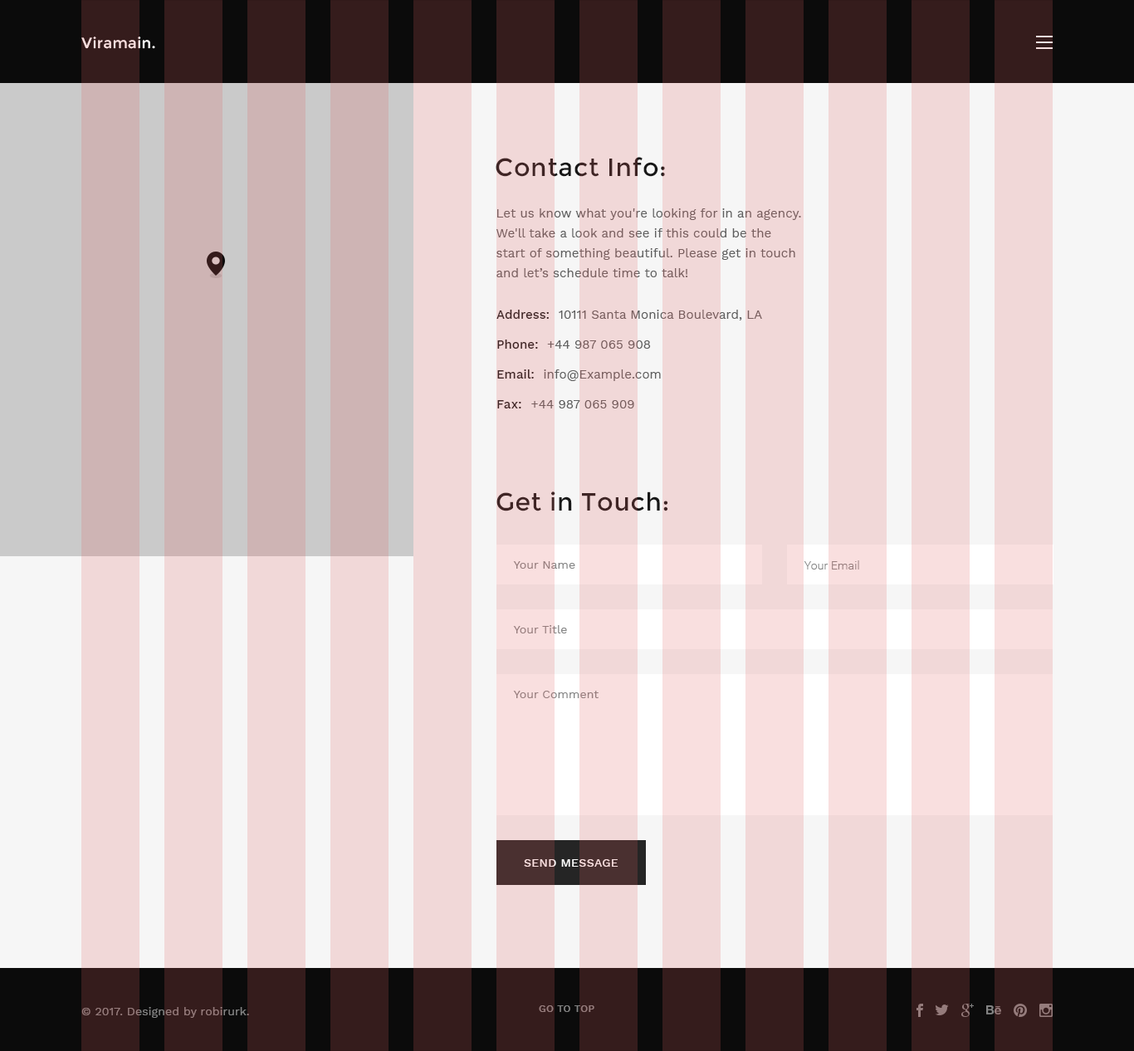
<style>
.page{position:relative;width:1134px;height:1051px;background:#f1d8d8}
.page>*{position:absolute;margin:0}
.t1{font:14.9px "Montserrat-Regular";letter-spacing:0.025em;color:#f9dfdf}
.t2{font:24.9px "Montserrat-Regular";letter-spacing:0.025em;color:#3f2525}
.t3{font:12.5px/19.9px "WorkSans-Regular";letter-spacing:0.005em;color:#795f5f}
.t4{font:12.5px/29.9px "WorkSans-Regular";letter-spacing:0.005em}
.t5{font:12.5px/29.9px "WorkSans-Medium";letter-spacing:0.005em}
.t6{font:12.5px/29.9px "WorkSans-Medium";letter-spacing:0.025em}
.t7{font:11.6px "WorkSans-Regular";letter-spacing:0.005em;color:#858585}
.t8{font:11.6px "Roboto-Light";letter-spacing:0.01em;color:#858585}
.t9{font:11.6px "WorkSans-Medium";letter-spacing:0.025em;color:#f9dfdf;text-transform:uppercase}
.t10{font:11.6px "WorkSans-Regular";letter-spacing:0.005em;color:#838383}
.t11{font:10px "WorkSans-Medium";letter-spacing:0.025em;color:#838383;text-transform:uppercase}
</style>
<div class="page">
<p class="t1" style="left:81px;top:37px;width:74px;height:12px">Viramain.</p>
<p class="t2" style="left:496px;top:157px;width:169px;height:20px">Contact Info:</p>
<p class="t3" style="left:496px;top:208px;width:305px;height:69px">Let us know what you're looking for in an agency. <br>We'll take a look and see if this could be the <br>start of something beautiful. Please get in touch <br>and let’s schedule time to talk!</p>
<p class="t4" style="left:497px;top:310px;width:265px;height:99px"><span class="t5">Address:  </span>10111 Santa Monica Boulevard, LA<br><span class="t5">Phone:  </span>+44 987 065 908<br><span class="t5">Email:  </span>info@Example.com<br><span class="t6">Fax:  </span>+44 987 065 909</p>
<p class="t2" style="left:497px;top:492px;width:171px;height:20px">Get in Touch:</p>
<p class="t7" style="left:513px;top:561px;width:62px;height:8px">Your Name</p>
<p class="t8" style="left:804px;top:561px;width:55px;height:9px">Your Email</p>
<p class="t7" style="left:513px;top:625px;width:54px;height:9px">Your Title</p>
<p class="t7" style="left:513px;top:691px;width:86px;height:7px">Your Comment</p>
<p class="t9" style="left:524px;top:859px;width:95px;height:8px">send message</p>
<p class="t10" style="left:81px;top:1007px;width:168px;height:11px">© 2017. Designed by robirurk.</p>
<p class="t11" style="left:539px;top:1006px;width:56px;height:6px">go to top</p>
</div>
